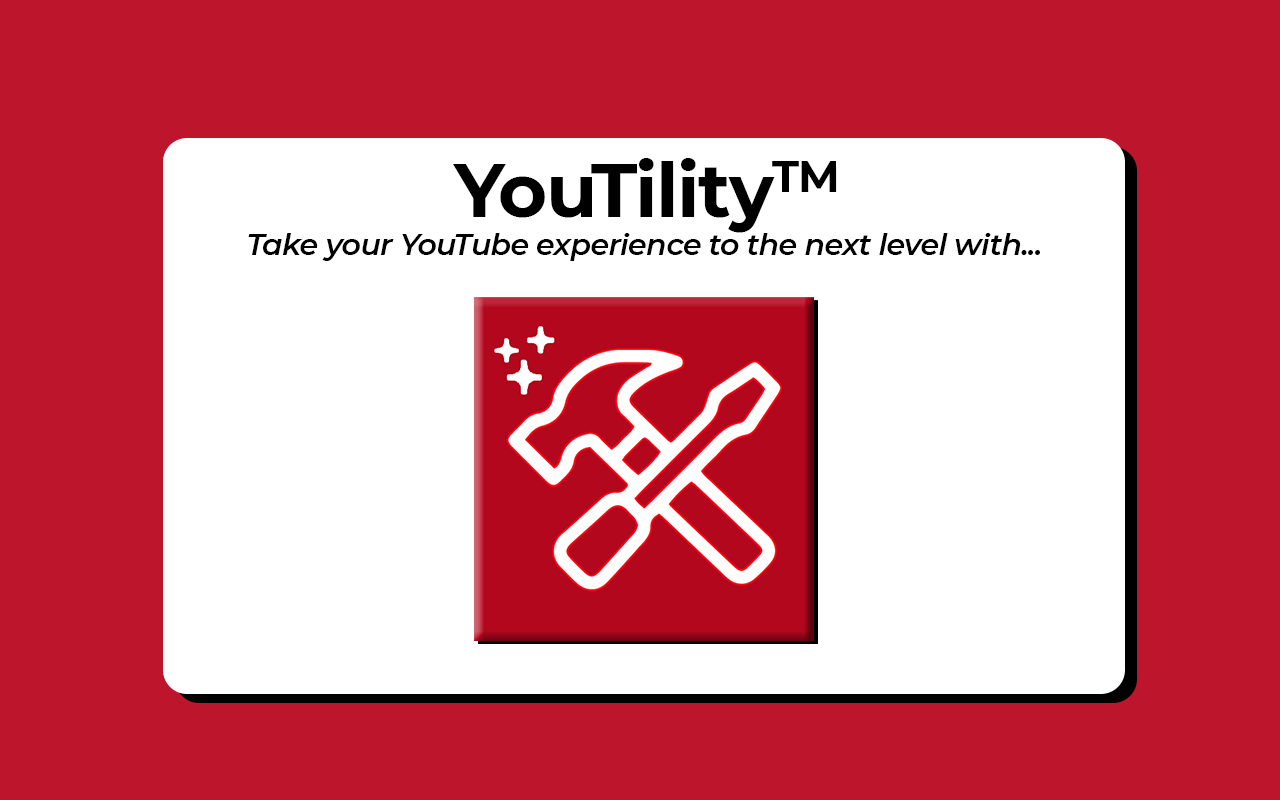
<style>
.page{position:relative;width:1280px;height:800px;background:#bd162c}
.page>*{position:absolute;margin:0}
.t1{font:75px "Montserrat-Bold";letter-spacing:-0.02em;color:#000000}
.t2{font:30px "Montserrat-SemiBoldItalic";letter-spacing:-0.02em;color:#000000}
</style>
<div class="page">
<p class="t1" style="left:453px;top:158px;width:384px;height:75px">YouTilityTM</p>
<p class="t2" style="left:248px;top:233px;width:792px;height:28px">Take your YouTube experience to the next level with...</p>
</div>
